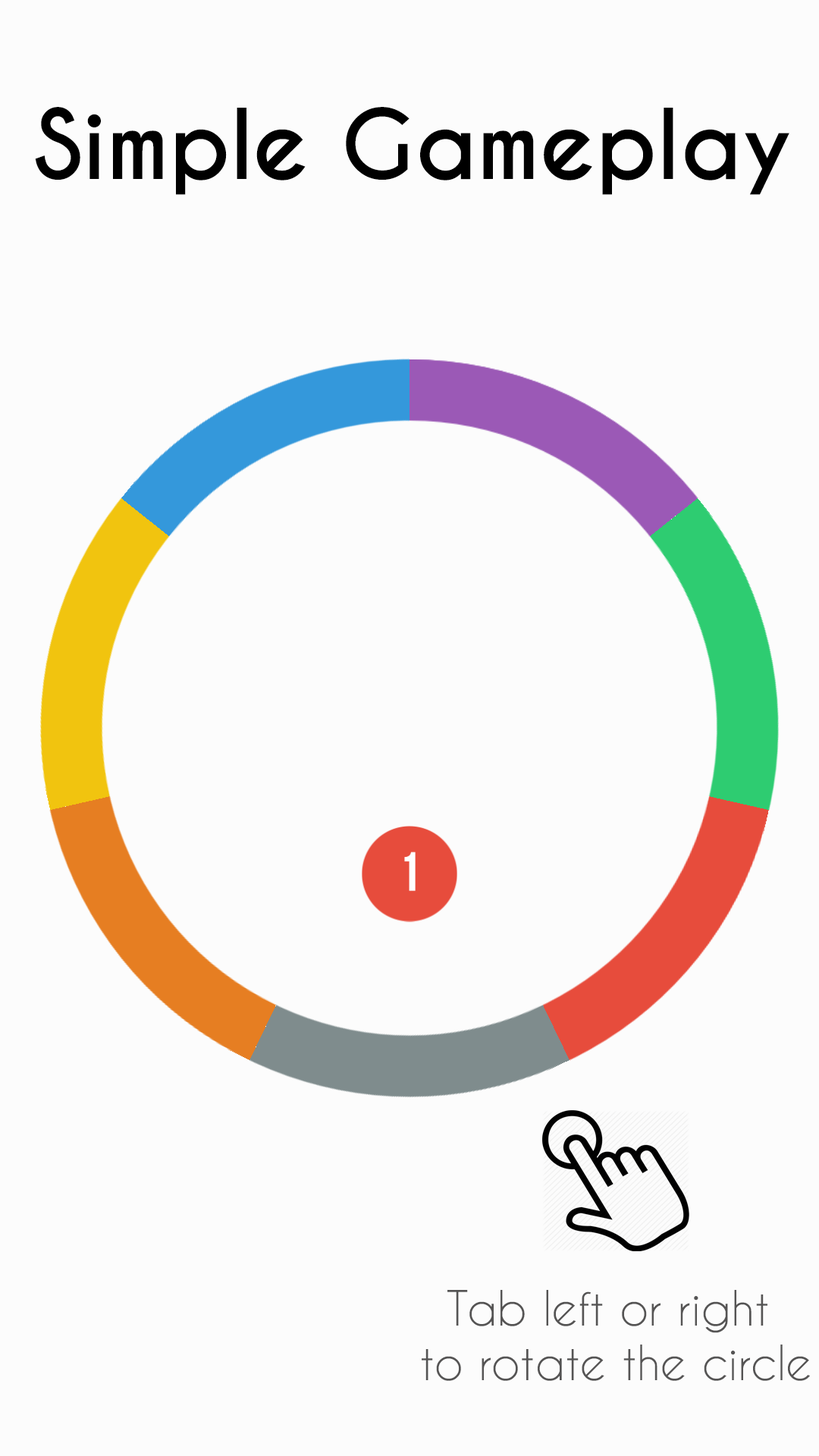
<style>
.page{position:relative;width:819px;height:1456px;background:#fcfcfc}
.page>*{position:absolute;margin:0}
.t1{font:91px "CaviarDreams-Bold";color:#000000}
.t2{font:45.5px "CaviarDreams";color:#555454}
</style>
<div class="page">
<p class="t1" style="left:35px;top:107px;width:754px;height:88px">Simple Gameplay</p>
<p class="t2" style="left:422px;top:1290px;width:388px;height:91px;text-align:center">Tab left or right <br>to rotate the circle</p>
</div>
